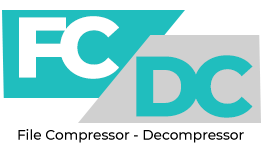
<style>
.page{position:relative;width:263px;height:150px;background:#ffffff}
.page>*{position:absolute;margin:0}
.t1{font:13.7px "Montserrat-Medium";color:#000000}
</style>
<div class="page">
<p class="t1" style="left:18px;top:129px;width:226px;height:14px">File Compressor - Decompressor</p>
</div>
